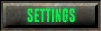
<style>
.page{position:relative;width:101px;height:31px}
.page>*{position:absolute;margin:0}
.t1{font:19px "Sunzoomspark";color:#00f646}
</style>
<div class="page">
<p class="t1" style="left:27px;top:8px;width:48px;height:15px">SETTINGS</p>
</div>
